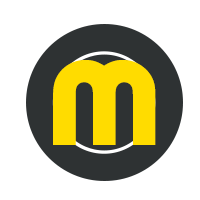
<style>
.page{position:relative;width:200px;height:200px;background:#ffffff}
.page>*{position:absolute;margin:0}
.t1{font:125px "PumpDemiBoldLetPlain";letter-spacing:0.005em;color:#ffdc00}
</style>
<div class="page">
<p class="t1" style="left:53px;top:60px;width:103px;height:85px">M</p>
</div>
